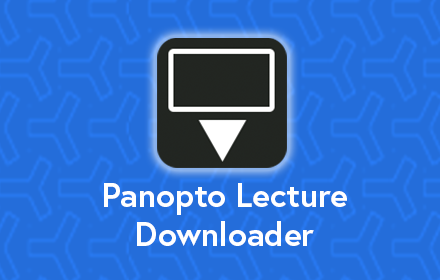
<style>
.page{position:relative;width:440px;height:280px;background:#246dda}
.page>*{position:absolute;margin:0}
.t1{font:33px/39px "Europa-Bold";color:#ffffff}
</style>
<div class="page">
<p class="t1" style="left:104px;top:183px;width:243px;height:63px;text-align:center">Panopto Lecture<br>Downloader</p>
</div>
